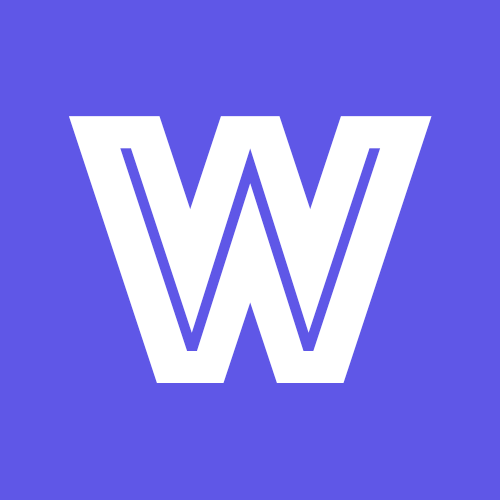
<style>
.page{position:relative;width:500px;height:500px;background:#5f57e7}
.page>*{position:absolute;margin:0}
.t1{font:400px "Phosphate-Inline";color:#ffffff}
</style>
<div class="page">
<p class="t1" style="left:69px;top:116px;width:363px;height:267px">W</p>
</div>
